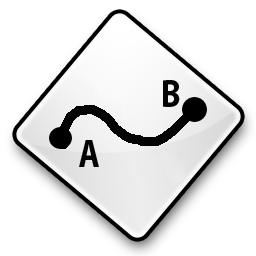
<style>
.page{position:relative;width:256px;height:256px;background:#ffffff}
.page>*{position:absolute;margin:0}
.t1{font:39.6px "MyriadPro-Bold";letter-spacing:0.005em;color:#040404;scale:0.82 1}
</style>
<div class="page">
<p class="t1" style="left:163px;top:80px;width:17px;height:27px">B</p>
<p class="t1" style="left:79px;top:140px;width:20px;height:27px">A</p>
</div>
